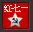
<style>
.page{position:relative;width:33px;height:32px;background:#c50000}
.page>*{position:absolute;margin:0}
.t1{font:10.4px "SimSun";letter-spacing:-0.25em;color:#ffffff}
</style>
<div class="page">
<p class="t1" style="left:4px;top:4px;width:24px;height:8px">红七一</p>
</div>
